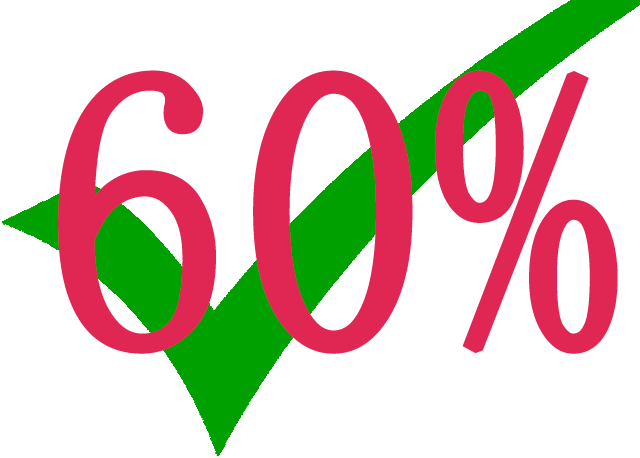
<style>
.page{position:relative;width:640px;height:458px;background:#ffffff}
.page>*{position:absolute;margin:0}
.t1{font:398.4px "SimSun";color:#e02652;font-weight:bold;scale:0.93 1}
</style>
<div class="page">
<p class="t1" style="left:58px;top:70px;width:560px;height:284px">60%</p>
</div>
